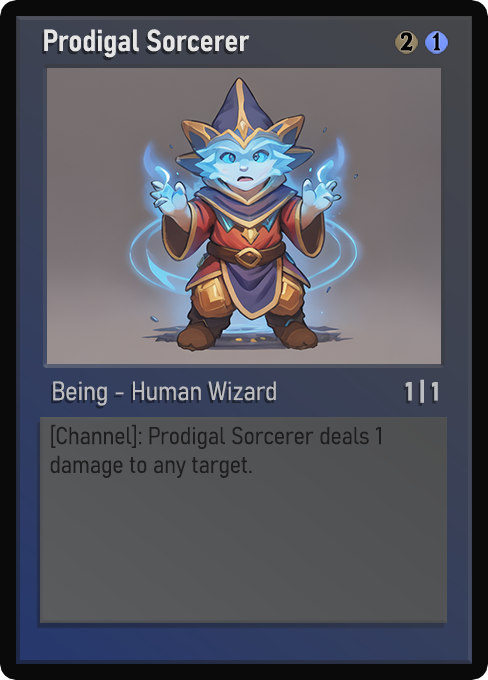
<style>
.page{position:relative;width:488px;height:680px}
.page>*{position:absolute;margin:0}
.t1{font:30px "Bahnschrift-SemiBoldSemiCondensed";color:#f2f2f2;font-weight:bold}
.t2{font:25px "WTRRoycroft";color:#000000;font-weight:bold;scale:1.09 1}
.t3{font:26px "Bahnschrift-LightSemiCondensed";color:#c8c8c8;font-weight:bold}
.t4{font:26px "Bahnschrift-BoldSemiCondensed";color:#bcbdc0;font-weight:bold}
.t5{font:24px "Bahnschrift-LightSemiCondensed";color:#1e1e1e;font-weight:bold}
</style>
<div class="page">
<p class="t1" style="left:44px;top:29px;width:206px;height:29px;opacity:0.9">Prodigal Sorcerer</p>
<p class="t2" style="left:400px;top:32px;width:13px;height:19px">2</p>
<p class="t2" style="left:432px;top:32px;width:9px;height:19px">1</p>
<p class="t3" style="left:53px;top:381px;width:223px;height:25px;opacity:0.9">Being - Human Wizard</p>
<p class="t4" style="left:405px;top:379px;width:33px;height:24px">1 | 1</p>
<p class="t5" style="left:50px;top:424px;width:331px;height:54px">[Channel]: Prodigal Sorcerer deals 1 damage to any target.</p>
</div>
